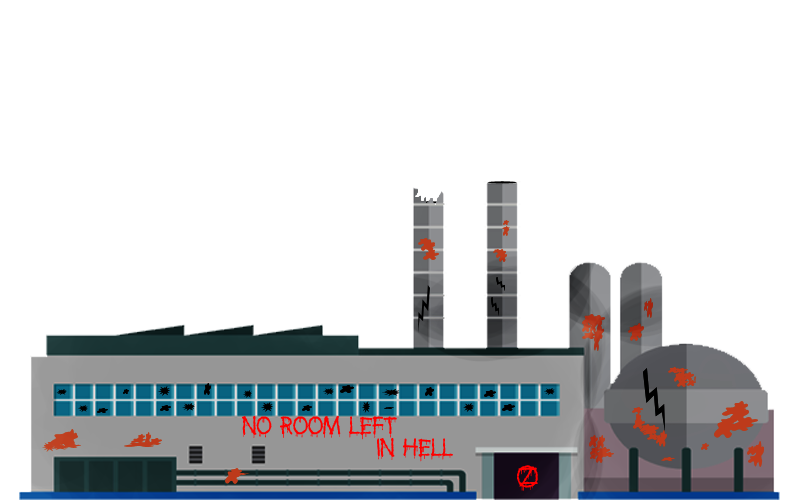
<style>
.page{position:relative;width:800px;height:500px;background:#ffffff}
.page>*{position:absolute;margin:0}
.t1{font:30px "Anti-Everything";color:#ff0000}
</style>
<div class="page">
<p class="t1" style="left:242px;top:415px;width:155px;height:25px">no room left</p>
<p class="t1" style="left:377px;top:437px;width:76px;height:25px">in hell</p>
<p class="t1" style="left:517px;top:465px;width:21px;height:26px">Z</p>
</div>
